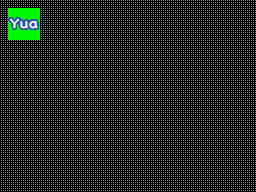
<style>
.page{position:relative;width:256px;height:192px;background:#000000}
.page>*{position:absolute;margin:0}
.t1{font:16.5px "DFLeiShoStd-W5";letter-spacing:0.075em;color:#ffffff}
</style>
<div class="page">
<p class="t1" style="left:10px;top:19px;width:28px;height:9px">Yua</p>
</div>
